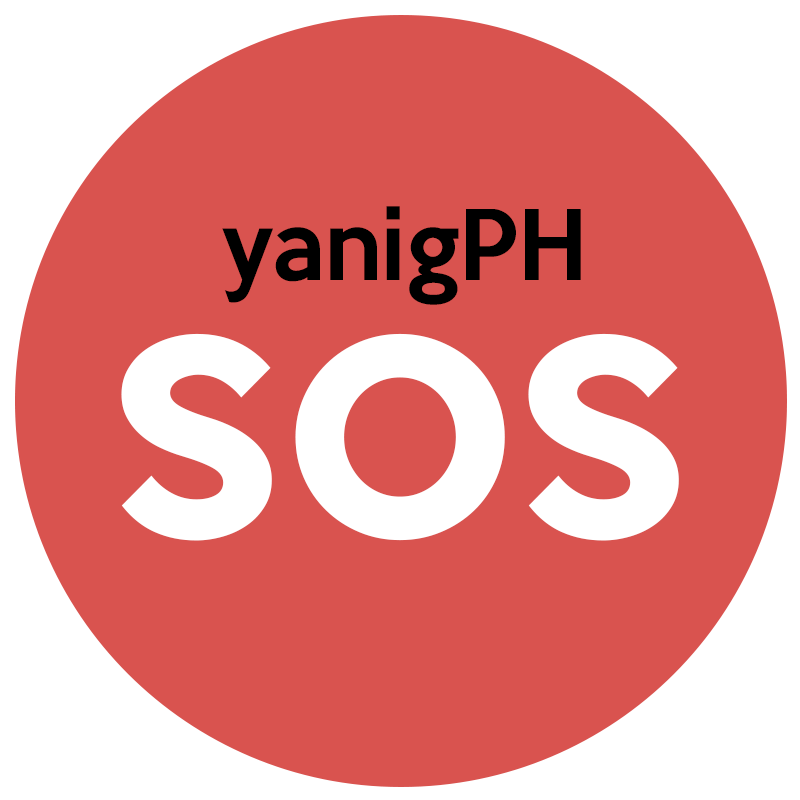
<style>
.page{position:relative;width:800px;height:800px;background:#d9534f}
.page>*{position:absolute;margin:0}
.t1{font:88.9px "KeepCalm-Medium";color:#000000}
.t2{font:338.9px "KeepCalm-Medium";color:#ffffff}
</style>
<div class="page">
<p class="t1" style="left:222px;top:206px;width:359px;height:99px">yanigPH</p>
<p class="t2" style="left:121px;top:333px;width:558px;height:208px">sos</p>
</div>
